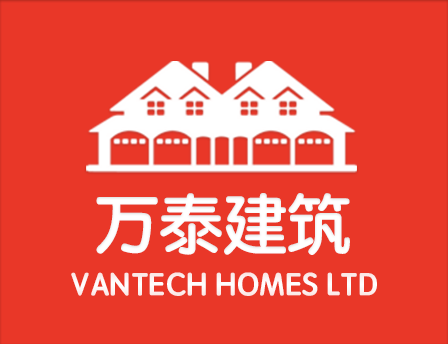
<style>
.page{position:relative;width:448px;height:344px;background:#e93728}
.page>*{position:absolute;margin:0}
.t1{font:64px "STYuanti-SC-Bold";color:#ffffff}
.t2{font:32px "STYuanti-SC-Bold";color:#ffffff}
</style>
<div class="page">
<p class="t1" style="left:96px;top:193px;width:254px;height:62px">万泰建筑</p>
<p class="t2" style="left:71px;top:272px;width:306px;height:24px">VANTECH HOMES LTD</p>
</div>
